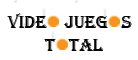
<style>
.page{position:relative;width:138px;height:60px;background:#ffffff}
.page>*{position:absolute;margin:0}
.t1{font:18px "Algerian";color:#000000}
</style>
<div class="page">
<p class="t1" style="left:7px;top:13px;width:125px;height:15px">vIDE    JUEG   S</p>
<p class="t1" style="left:44px;top:39px;width:60px;height:12px">T   TAL</p>
</div>
